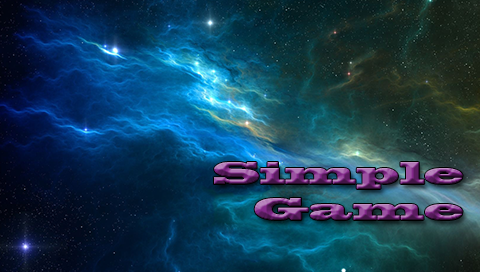
<style>
.page{position:relative;width:480px;height:272px}
.page>*{position:absolute;margin:0}
.t1{font:30px "BlackoakStd"}
</style>
<div class="page">
<p class="t1" style="left:214px;top:162px;width:249px;height:58px;text-align:right">Simple<br>Game</p>
</div>
